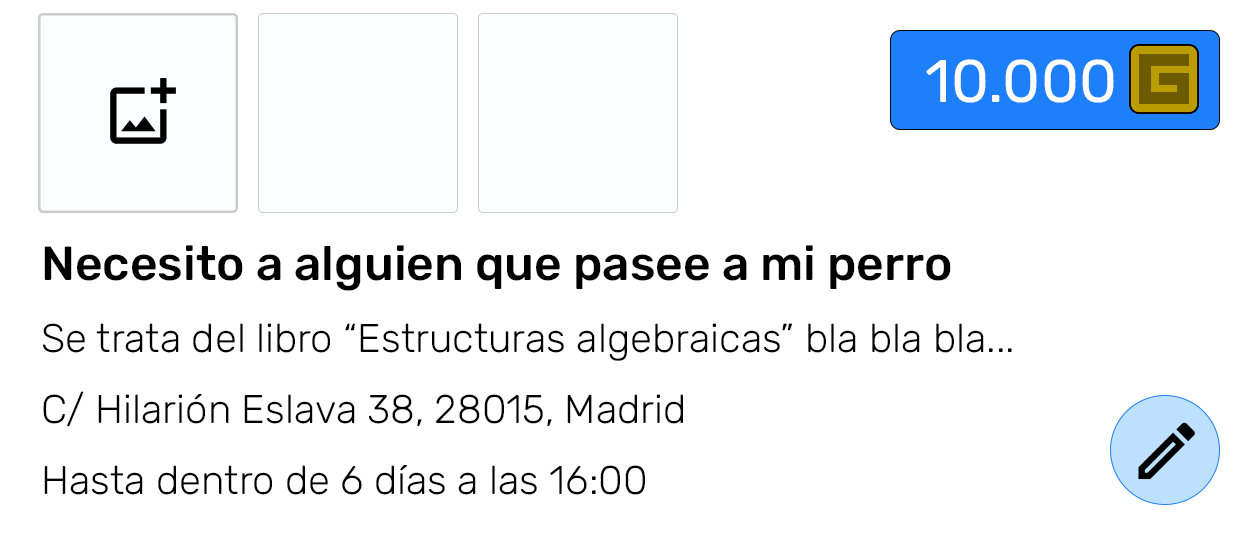
<style>
.page{position:relative;width:1250px;height:550px;background:#ffffff}
.page>*{position:absolute;margin:0}
.t1{font:60px "Rubik-Regular";color:#ffffff}
.t2{font:40px "Rubik-Light";color:#000000}
.t3{font:10px "Roboto-Regular";color:#000000}
.t4{font:48px "Rubik-Medium";color:#000000}
</style>
<div class="page">
<p class="t1" style="left:926px;top:59px;width:188px;height:44px">10.000</p>
<p class="t2" style="left:43px;top:245px;width:969px;height:250px"><span class="t3">      <br><br><br>      <br><br><br>      <br><br><br></span><span class="t4">Necesito a alguien que pasee a mi perro<br><br></span>Se trata del libro “Estructuras algebraicas” bla bla bla...<br><br><br>C/ Hilarión Eslava 38, 28015, Madrid<br><br><br>Hasta dentro de 6 días a las 16:00</p>
</div>
